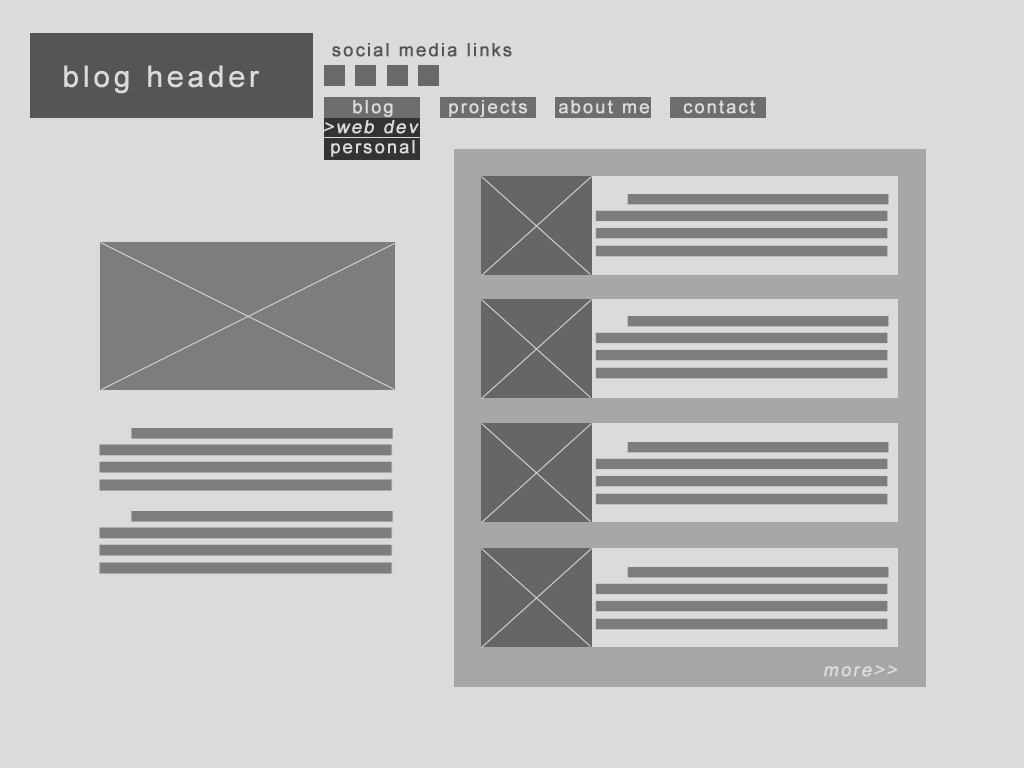
<style>
.page{position:relative;width:1024px;height:768px;background:#dbdbdb}
.page>*{position:absolute;margin:0}
.t1{font:18px "ArialMT";letter-spacing:0.1em;color:#555555;font-weight:bold}
.t2{font:30px "ArialMT";letter-spacing:0.1em;color:#dbdbdb;font-weight:bold}
.t3{font:18px "ArialMT";letter-spacing:0.1em;color:#dbdbdb;font-weight:bold}
.t4{font:18px "ArialMT";letter-spacing:0.1em;color:#dbdbdb;font-weight:bold;font-style:italic}
</style>
<div class="page">
<p class="t1" style="left:332px;top:43px;width:180px;height:14px">social media links</p>
<p class="t2" style="left:64px;top:65px;width:196px;height:29px">blog header</p>
<p class="t3" style="left:353px;top:100px;width:40px;height:17px">blog</p>
<p class="t3" style="left:449px;top:100px;width:78px;height:17px">projects</p>
<p class="t3" style="left:559px;top:100px;width:90px;height:14px">about me</p>
<p class="t3" style="left:683px;top:100px;width:73px;height:14px">contact</p>
<p class="t4" style="left:324px;top:120px;width:95px;height:14px">&gt;web dev</p>
<p class="t3" style="left:331px;top:140px;width:84px;height:17px">personal</p>
<p class="t4" style="left:824px;top:665px;width:74px;height:12px">more&gt;&gt;</p>
</div>
